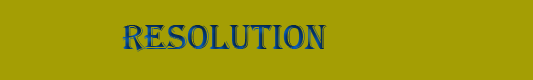
<style>
.page{position:relative;width:533px;height:80px;background:#a49e04}
.page>*{position:absolute;margin:0}
.t1{font:36px "Algerian"}
</style>
<div class="page">
<p class="t1" style="left:122px;top:25px;width:205px;height:27px">Resolution</p>
</div>
